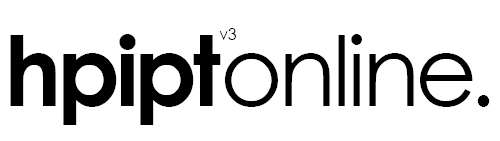
<style>
.page{position:relative;width:500px;height:141px;background:#ffffff}
.page>*{position:absolute;margin:0}
.t1{font:16.2px "CenturyGothic";letter-spacing:-0.04em;color:#000000}
.t2{font:96.5px "CenturyGothic-Bold";letter-spacing:-0.04em;color:#000000}
.t3{font:96.5px "CenturyGothic";letter-spacing:-0.04em;color:#000000}
</style>
<div class="page">
<p class="t1" style="left:219px;top:28px;width:17px;height:12px">v3</p>
<p class="t2" style="left:10px;top:34px;width:211px;height:91px">hpipt</p>
<p class="t3" style="left:224px;top:34px;width:266px;height:73px">online.</p>
</div>
